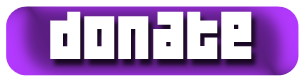
<style>
.page{position:relative;width:305px;height:81px;background:#ffffff}
.page>*{position:absolute;margin:0}
.t1{font:60px "04b19";color:#ffffff}
</style>
<div class="page">
<p class="t1" style="left:50px;top:11px;width:202px;height:48px">donate</p>
</div>
